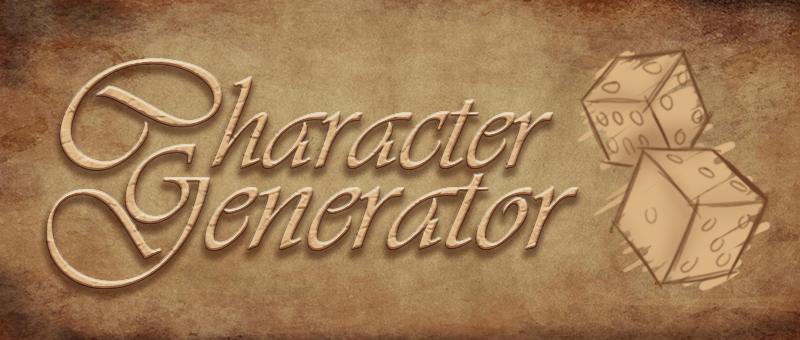
<style>
.page{position:relative;width:800px;height:340px}
.page>*{position:absolute;margin:0}
.t1{font:181.3px "Vivaldii"}
.t2{font:136px "Vivaldii"}
.t3{font:151.2px "Vivaldii"}
</style>
<div class="page">
<p class="t1" style="left:60px;top:59px;width:162px;height:111px;rotate:15deg">C</p>
<p class="t2" style="left:211px;top:76px;width:342px;height:93px">haracter</p>
<p class="t3" style="left:46px;top:144px;width:532px;height:144px">Generator</p>
</div>
